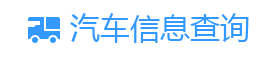
<style>
.page{position:relative;width:260px;height:60px;background:#ffffff}
.page>*{position:absolute;margin:0}
.t1{font:30px "MicrosoftYaHei";color:#3399ff}
</style>
<div class="page">
<p class="t1" style="left:70px;top:13px;width:179px;height:30px">汽车信息查询</p>
</div>
